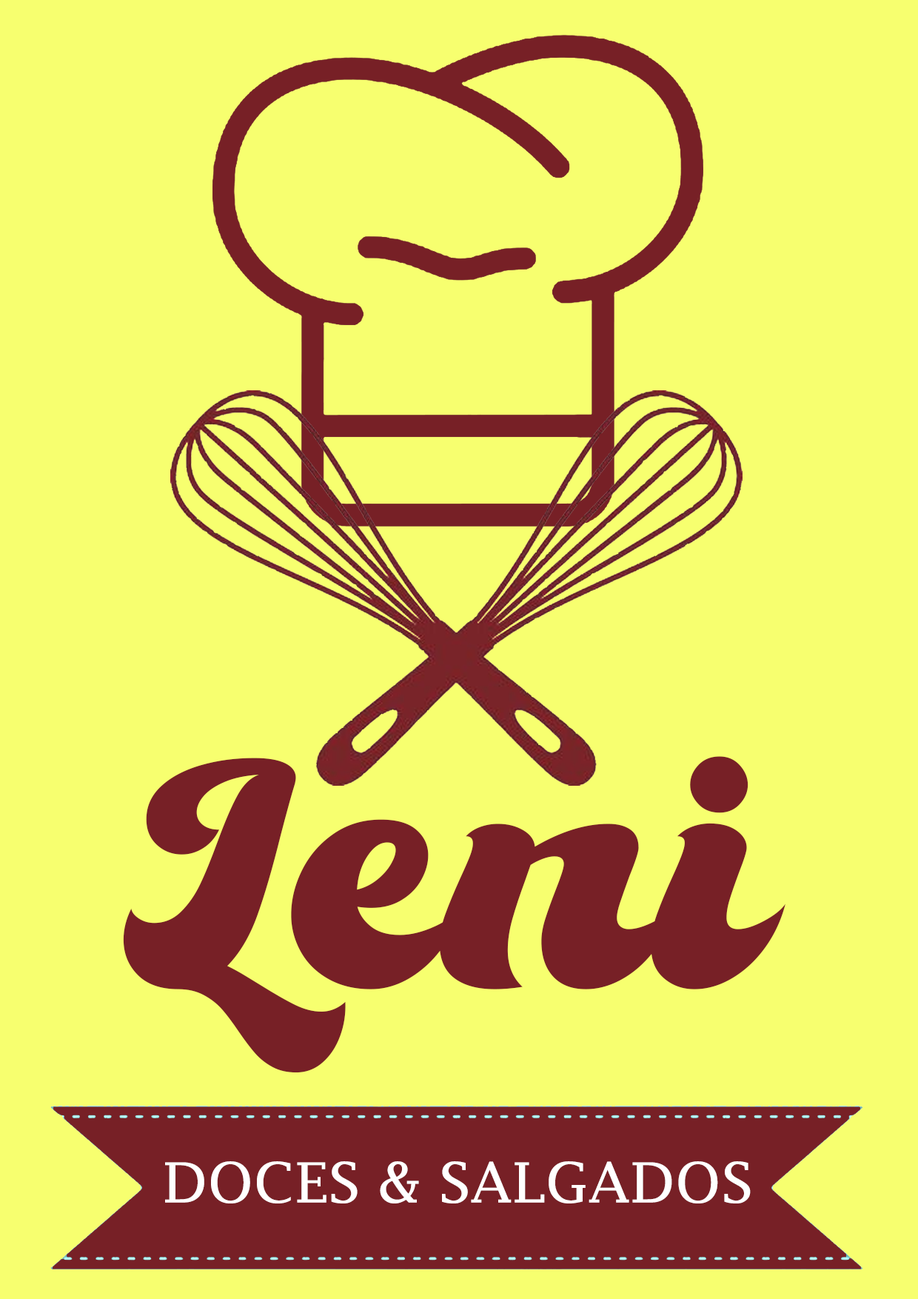
<style>
.page{position:relative;width:918px;height:1299px;background:#f7ff6f}
.page>*{position:absolute;margin:0}
.t1{font:387.1px "TheKanderlic-Regular";color:#772026}
.t2{font:55.3px "LucidaFax";color:#ffffff;scale:1.05 1}
</style>
<div class="page">
<p class="t1" style="left:123px;top:756px;width:663px;height:317px">Leni</p>
<p class="t2" style="left:165px;top:1161px;width:586px;height:42px">DOCES &amp; SALGADOS</p>
</div>
